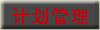
<style>
.page{position:relative;width:100px;height:30px;background:#464646}
.page>*{position:absolute;margin:0}
.t1{font:18px "NSimSun";letter-spacing:0.1em;color:#c8000a;font-weight:bold}
</style>
<div class="page">
<p class="t1" style="left:11px;top:7px;width:78px;height:18px">计划管理</p>
</div>
